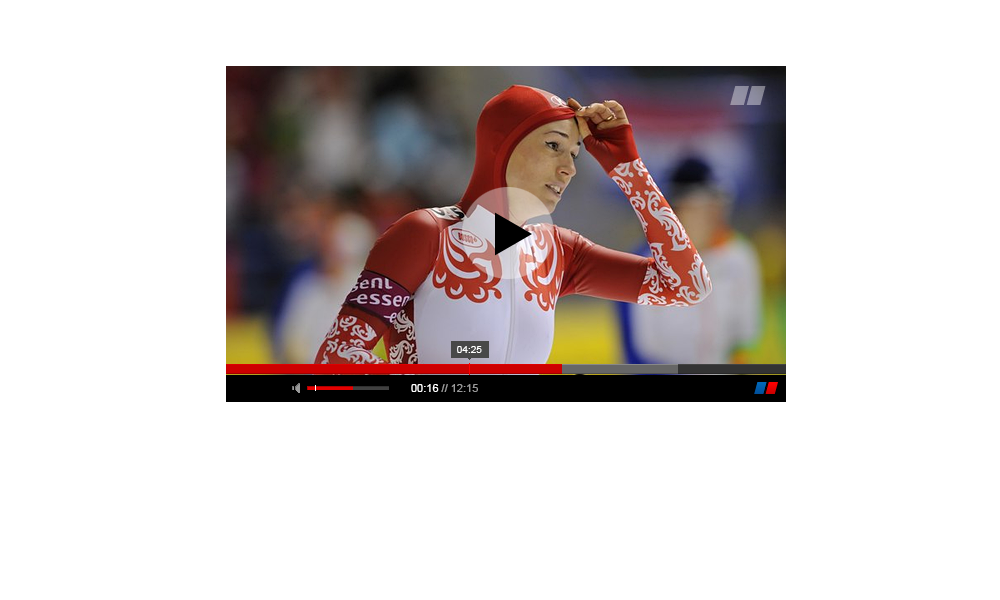
<style>
.page{position:relative;width:1000px;height:600px;background:#ffffff}
.page>*{position:absolute;margin:0}
.t1{font:10px "ArialMT";color:#ffffff}
.t2{font:11px "ArialMT";color:#9a9a9a}
.t3{font:11px "ArialMT";color:#ffffff}
</style>
<div class="page">
<p class="t1" style="left:457px;top:346px;width:25px;height:7px">04:25</p>
<p class="t2" style="left:411px;top:384px;width:67px;height:8px"><span class="t3">00:16</span> // 12:15</p>
</div>
